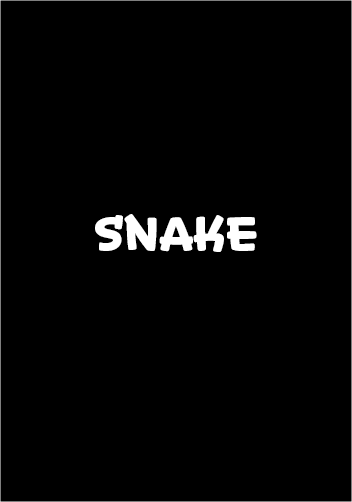
<style>
.page{position:relative;width:352px;height:502px;background:#000000}
.page>*{position:absolute;margin:0}
.t1{font:46.4px "Snicker-Bold";color:#ffffff}
</style>
<div class="page">
<p class="t1" style="left:95px;top:214px;width:162px;height:38px">SNAKE</p>
</div>
